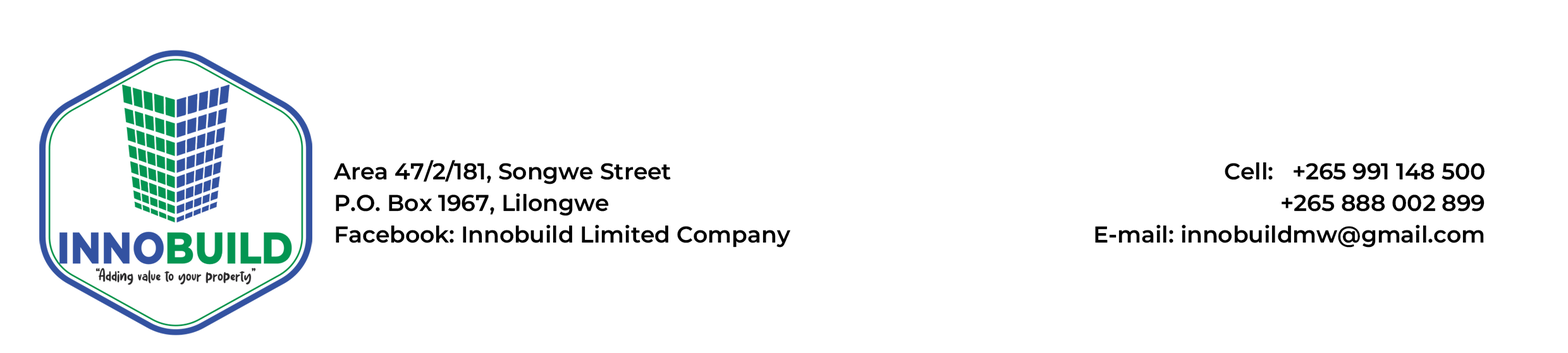
<style>
.page{position:relative;width:1568px;height:353px;background:#ffffff}
.page>*{position:absolute;margin:0}
.t1{font:22.8px/31.6px "MontserratRoman-SemiBold";color:#000000}
</style>
<div class="page">
<p class="t1" style="left:333px;top:160px;width:457px;height:88px">Area 47/2/181, Songwe Street<br>P.O. Box 1967, Lilongwe<br>Facebook: Innobuild Limited Company</p>
<p class="t1" style="left:1095px;top:162px;width:390px;height:86px;text-align:right">Cell:  +265 991 148 500<br>   +265 888 002 899<br>E-mail: innobuildmw@gmail.com</p>
</div>
